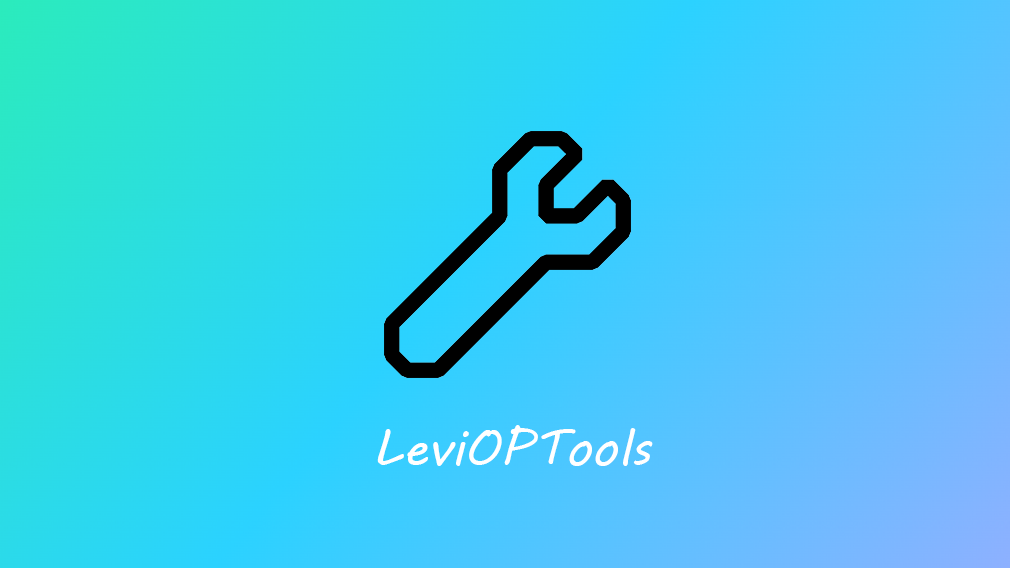
<style>
.page{position:relative;width:1010px;height:568px}
.page>*{position:absolute;margin:0}
.t1{font:50px "MVBoli";color:#ffffff}
</style>
<div class="page">
<p class="t1" style="left:377px;top:425px;width:276px;height:41px">LeviOPTools</p>
</div>
